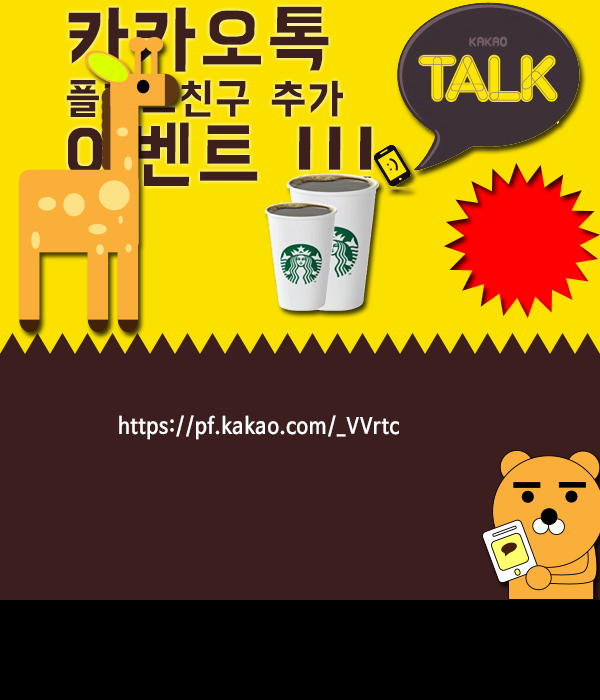
<style>
.page{position:relative;width:600px;height:700px;background:#3c1e1e}
.page>*{position:absolute;margin:0}
.t1{font:43.5px/48.3px "BMHANNAPro";letter-spacing:0.04em;color:#3d1f1d}
.t2{font:77.3px/72.4px "BMHANNAPro";letter-spacing:0.04em;color:#3d1f1d}
.t3{font:77.3px/67.6px "BMHANNAPro";letter-spacing:0.04em;color:#3d1f1d}
.t4{font:22px "NanumBarunGothicBold";letter-spacing:0.04em;color:#ffffff;scale:0.9 1}
</style>
<div class="page">
<p class="t1" style="left:66px;top:6px;width:306px;height:182px"><span class="t2">카카오톡<br></span>플러스친구 추가<br><span class="t3">이벤트 !!!</span></p>
<p class="t4" style="left:119px;top:415px;width:280px;height:25px">https://pf.kakao.com/_VVrtc</p>
</div>
